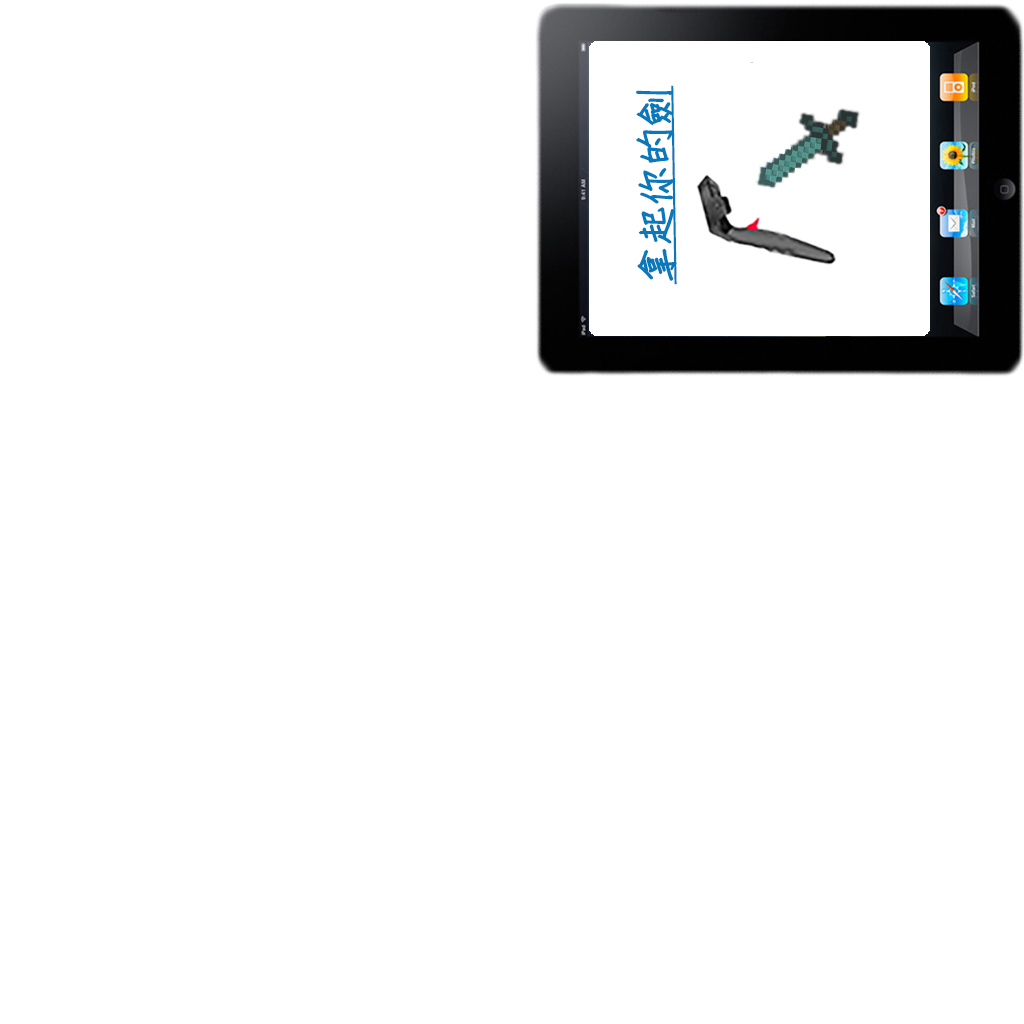
<style>
.page{position:relative;width:1024px;height:1024px;background:#ffffff}
.page>*{position:absolute;margin:0}
.t1{font:40px "DFChu-W4-WINP-BF";color:#0979ba;font-weight:bold;text-decoration:underline;scale:0.97 1}
</style>
<div class="page">
<p class="t1" style="left:636px;top:85px;width:41px;height:200px;rotate:-91deg">拿起你的劍</p>
</div>
